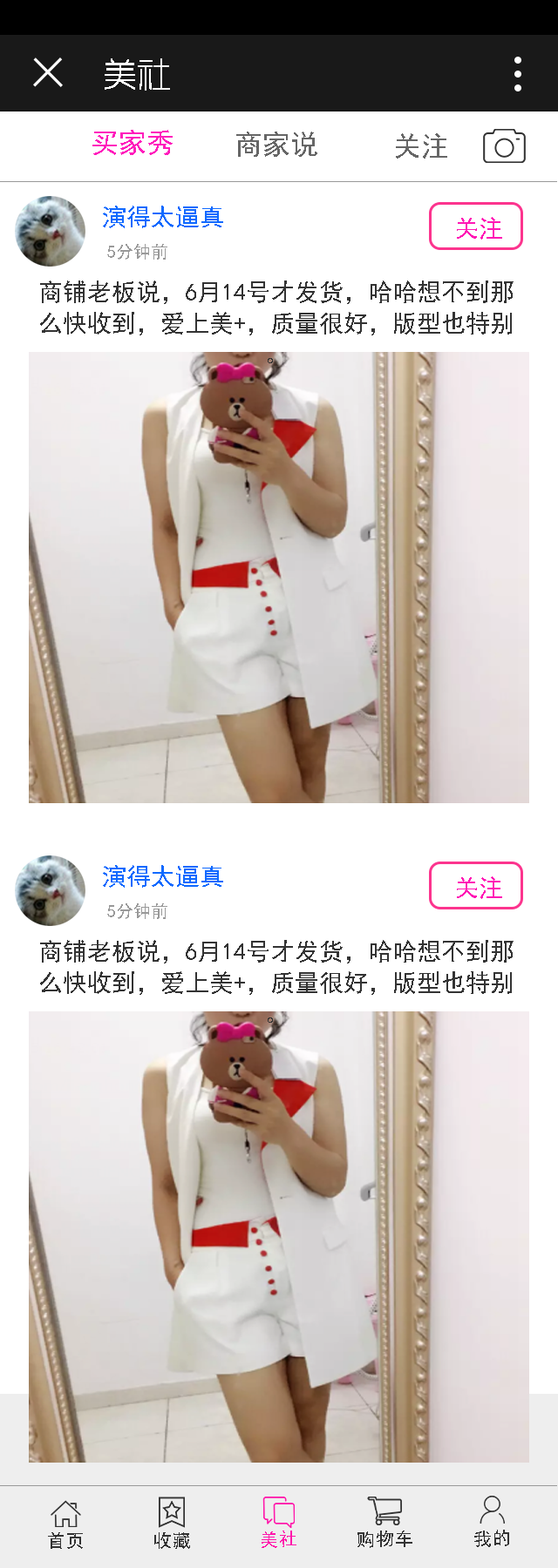
<style>
.page{position:relative;width:558px;height:1568px;background:#ffffff}
.page>*{position:absolute;margin:0}
.t1{font:33.1px "RTWSYueGoG0v1-ExLight";color:#ffffff;font-weight:bold}
.t2{font:27.9px "SimHei";color:#ff1cbc}
.t3{font:27.9px "SimHei";color:#666666}
.t4{font:24.4px "SimHei";color:#0f69ff}
.t5{font:24.4px "SimHei";color:#ff17b5}
.t6{font:17.4px "SimHei";color:#999999}
.t7{font:24.4px/31.4px "SimHei";color:#333333}
.t8{font:31.4px "SimHei";color:#333333}
.t9{font:31.4px "SimHei";color:#ff16aa}
</style>
<div class="page">
<p class="t1" style="left:105px;top:58px;width:65px;height:33px">美社</p>
<p class="t2" style="left:92px;top:130px;width:80px;height:25px">买家秀</p>
<p class="t3" style="left:236px;top:132px;width:81px;height:25px">商家说</p>
<p class="t3" style="left:395px;top:133px;width:52px;height:26px">关注</p>
<p class="t4" style="left:103px;top:206px;width:120px;height:22px">演得太逼真</p>
<p class="t5" style="left:456px;top:217px;width:46px;height:23px">关注</p>
<p class="t6" style="left:107px;top:244px;width:60px;height:16px">5分钟前</p>
<p class="t7" style="left:40px;top:280px;width:473px;height:83px;text-align:center">商铺老板说，6月14号才发货，哈哈想不到那么快收到，爱上美+，质量很好，版型也特别。</p>
<p class="t4" style="left:103px;top:865px;width:120px;height:23px">演得太逼真</p>
<p class="t5" style="left:456px;top:876px;width:46px;height:23px">关注</p>
<p class="t6" style="left:107px;top:903px;width:60px;height:16px">5分钟前</p>
<p class="t7" style="left:40px;top:940px;width:473px;height:83px;text-align:center">商铺老板说，6月14号才发货，哈哈想不到那么快收到，爱上美+，质量很好，版型也特别。</p>
<p class="t8" style="left:474px;top:1530px;width:35px;height:17px;rotate:-1deg">我的</p>
<p class="t8" style="left:48px;top:1532px;width:35px;height:17px;rotate:-1deg">首页</p>
<p class="t8" style="left:154px;top:1532px;width:36px;height:17px;rotate:-1deg">收藏</p>
<p class="t9" style="left:261px;top:1531px;width:35px;height:17px;rotate:-1deg">美社</p>
<p class="t8" style="left:357px;top:1531px;width:55px;height:17px;rotate:-1deg">购物车</p>
</div>
